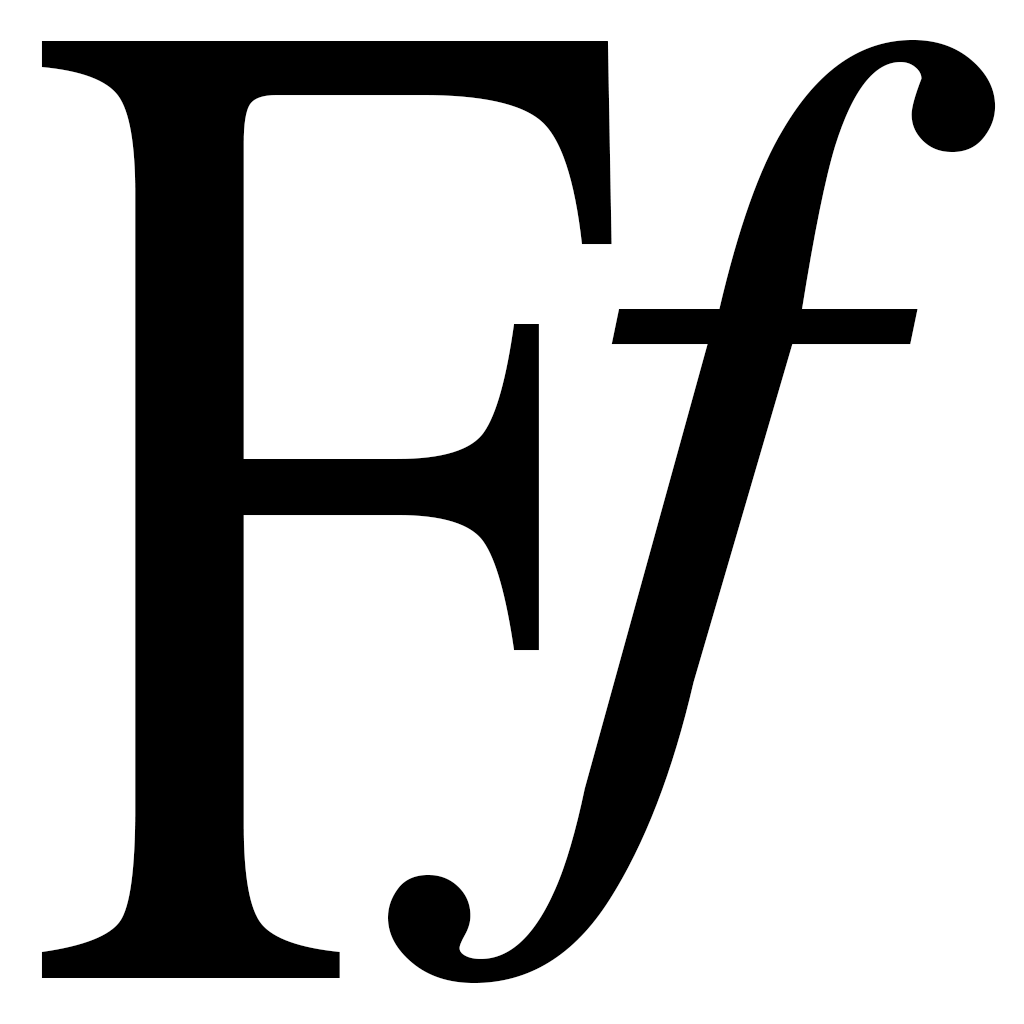
<style>
.page{position:relative;width:1024px;height:1024px;background:#ffffff}
.page>*{position:absolute;margin:0}
.t1{font:1415.5px "Times-Roman";color:#000000;scale:0.75 1}
.t2{font:1062.5px "Times-Italic";color:#000000}
</style>
<div class="page">
<p class="t1" style="left:41px;top:41px;width:571px;height:937px">F</p>
<p class="t2" style="left:388px;top:40px;width:608px;height:943px">f</p>
</div>
